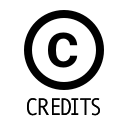
<style>
.page{position:relative;width:128px;height:128px;background:#ffffff}
.page>*{position:absolute;margin:0}
.t1{font:24px "MonoSpatial";color:#000000}
</style>
<div class="page">
<p class="t1" style="left:27px;top:98px;width:73px;height:18px">CREDITS</p>
</div>
